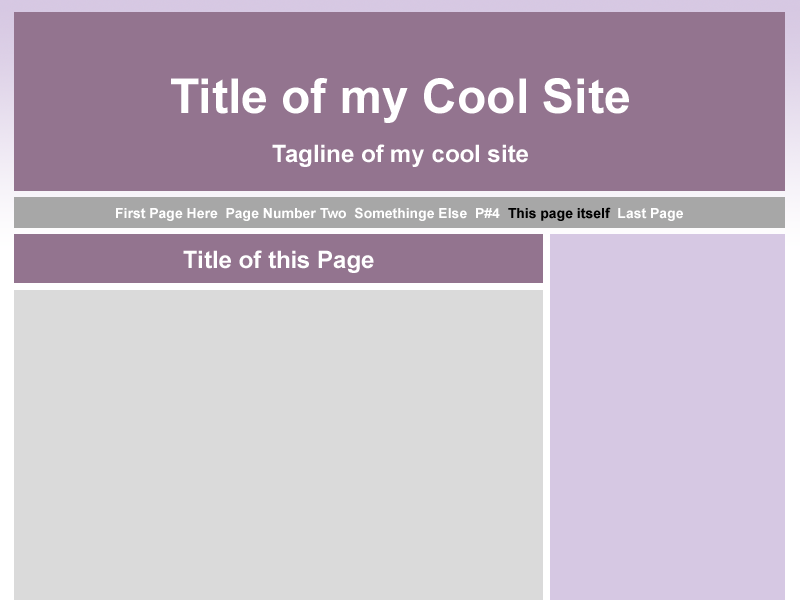
<style>
.page{position:relative;width:800px;height:600px;background:#dadada}
.page>*{position:absolute;margin:0}
.t1{font:48px "Arial-BoldMT";color:#ffffff}
.t2{font:24px "Arial-BoldMT";color:#ffffff}
</style>
<div class="page">
<p class="t1" style="left:171px;top:78px;width:458px;height:45px">Title of my Cool Site</p>
<p class="t2" style="left:272px;top:144px;width:256px;height:23px">Tagline of my cool site</p>
<p class="t2" style="left:183px;top:250px;width:191px;height:23px">Title of this Page</p>
</div>
